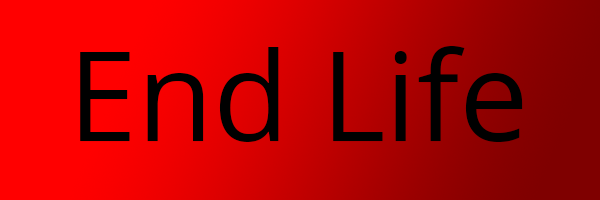
<style>
.page{position:relative;width:600px;height:200px}
.page>*{position:absolute;margin:0}
.t1{font:123.9px "OpenSans";color:#000000}
</style>
<div class="page">
<p class="t1" style="left:80px;top:46px;width:443px;height:96px">End Life</p>
</div>
